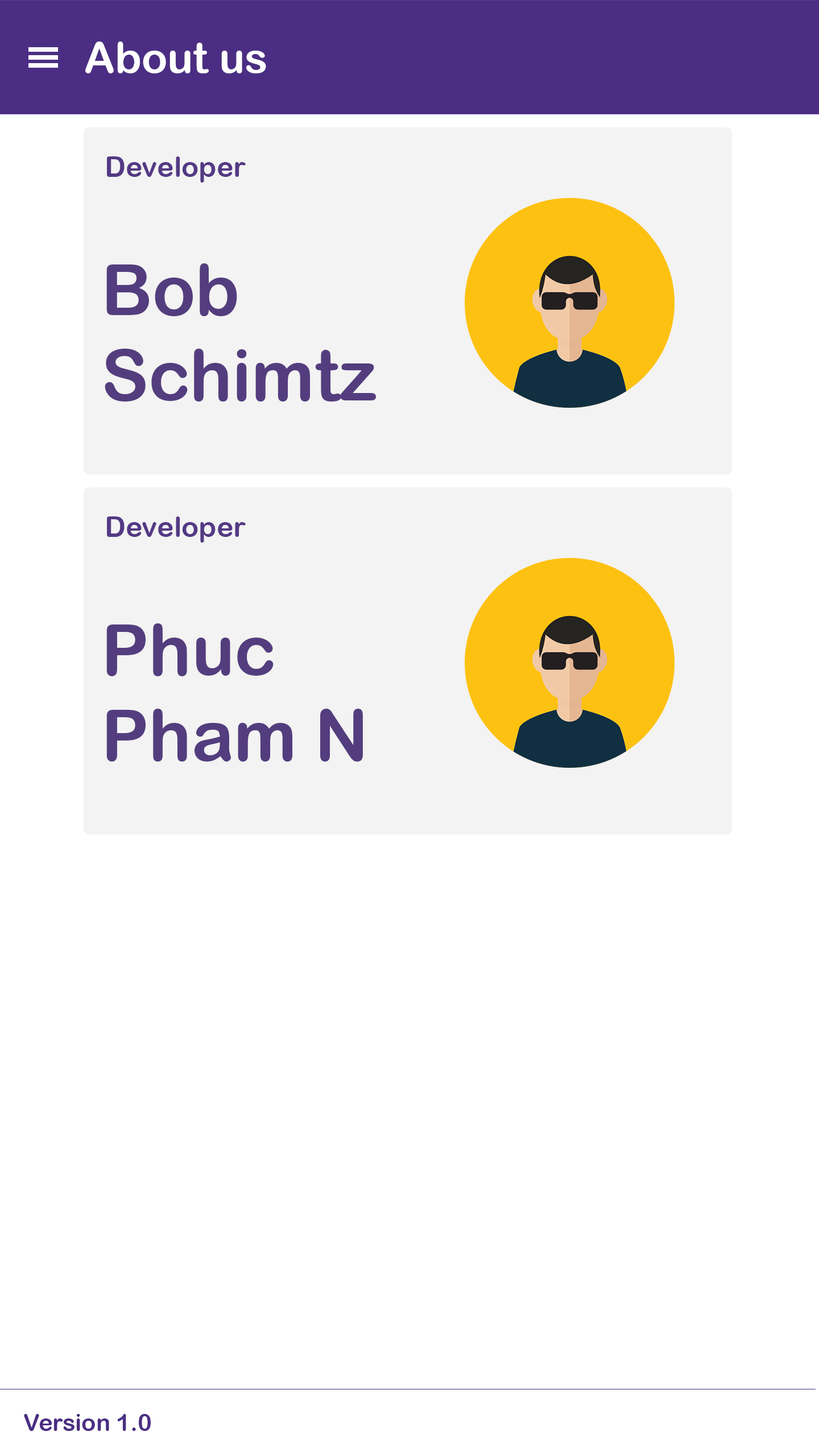
<style>
.page{position:relative;width:819px;height:1456px;background:#ffffff}
.page>*{position:absolute;margin:0}
.t1{font:42.7px "ArialRoundedMTBold";color:#ffffff}
.t2{font:28.4px "ArialRoundedMTBold";color:#4b2e83}
.t3{font:71.1px "ArialRoundedMTBold";color:#4a317b}
.t4{font:23.7px "ArialRoundedMTBold";color:#4b2e83}
</style>
<div class="page">
<p class="t1" style="left:85px;top:42px;width:181px;height:31px">About us</p>
<p class="t2" style="left:107px;top:156px;width:139px;height:27px">Developer</p>
<p class="t3" style="left:105px;top:263px;width:272px;height:139px">Bob<br>Schimtz</p>
<p class="t2" style="left:107px;top:516px;width:139px;height:27px">Developer</p>
<p class="t3" style="left:106px;top:623px;width:257px;height:139px">Phuc<br>Pham N</p>
<p class="t4" style="left:24px;top:1414px;width:127px;height:17px">Version 1.0</p>
</div>
